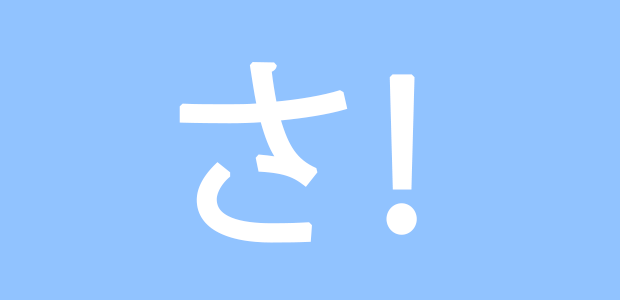
<style>
.page{position:relative;width:620px;height:300px;background:#91c3ff}
.page>*{position:absolute;margin:0}
.t1{font:200px "KozGoPr6N-Regular";color:#ffffff;font-weight:bold}
</style>
<div class="page">
<p class="t1" style="left:179px;top:62px;width:238px;height:181px">さ！</p>
</div>
